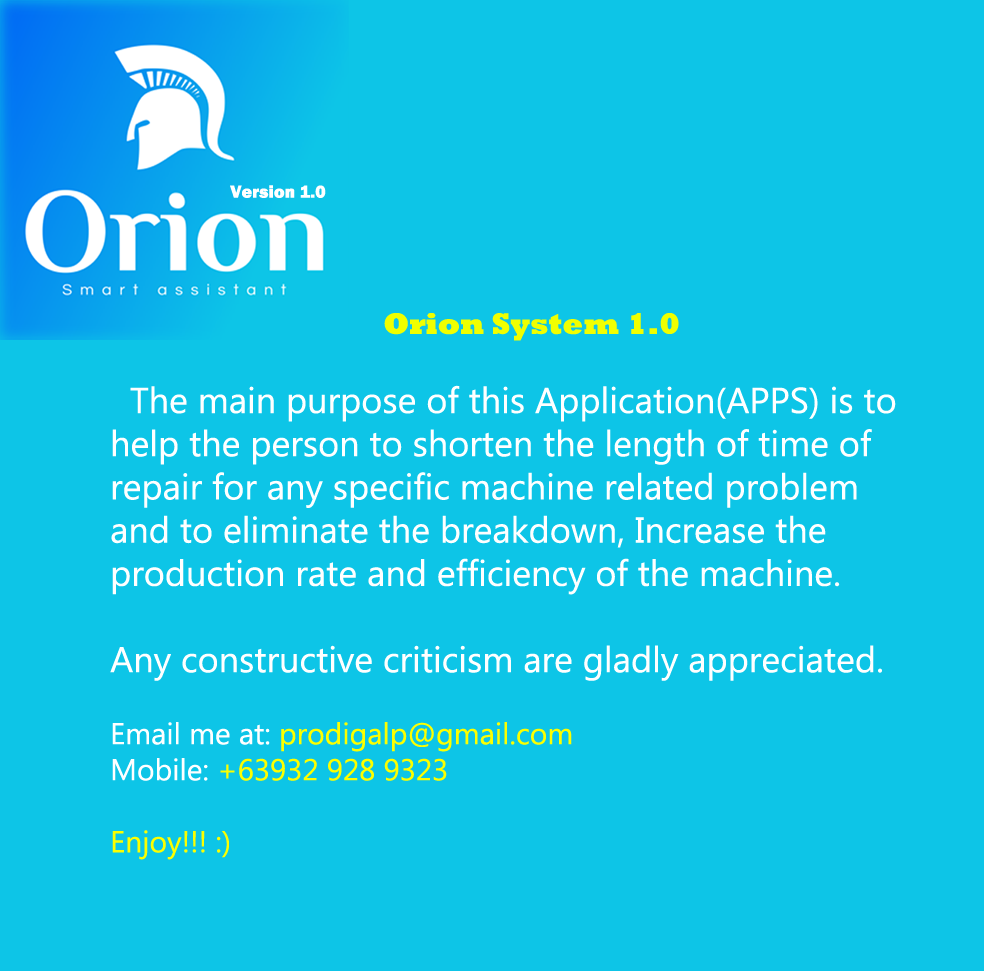
<style>
.page{position:relative;width:984px;height:971px;background:#0dc5e7}
.page>*{position:absolute;margin:0}
.t1{font:18px "FranklinGothic-Heavy";color:#ffffff}
.t2{font:36px "MicrosoftPhagsPa";color:#ffffff}
.t3{font:30px "Rockwell-ExtraBold";color:#f0ff00}
.t4{font:30px "MicrosoftPhagsPa";color:#ffffff}
.t5{font:30px "MicrosoftPhagsPa";color:#fcff00}
</style>
<div class="page">
<p class="t1" style="left:230px;top:185px;width:96px;height:13px">Version 1.0</p>
<p class="t2" style="left:110px;top:313px;width:786px;height:547px;text-align:center"><span class="t3">Orion System 1.0<br><br></span>  The main purpose of this Application(APPS) is to<br>help the person to shorten the length of time of <br>repair for any specific machine related problem  <br>and to eliminate the breakdown, Increase the <br>production rate and efficiency of the machine.<br><br>Any constructive criticism are gladly appreciated.<br><span class="t4"><br>Email me at: </span><span class="t5">prodigalp@gmail.com<br></span><span class="t4">Mobile: </span><span class="t5">+63932 928 9323<br><br>Enjoy!!! :)</span></p>
</div>
